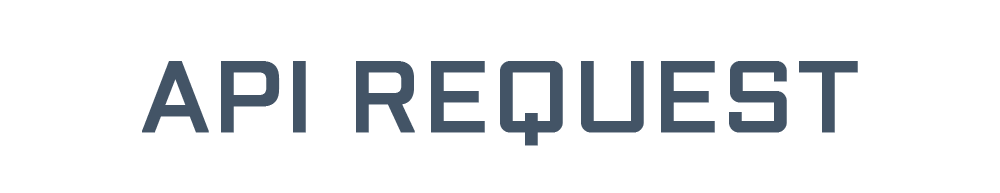
<style>
.page{position:relative;width:1000px;height:193px;background:#ffffff}
.page>*{position:absolute;margin:0}
.t1{font:100px "Aldrich";color:#435466;font-weight:bold}
</style>
<div class="page">
<p class="t1" style="left:142px;top:61px;width:716px;height:85px">API REQUEST</p>
</div>
